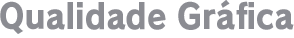
<style>
.page{position:relative;width:294px;height:38px;background:#ffffff}
.page>*{position:absolute;margin:0}
.t1{font:34.3px "RodinPro-EB";letter-spacing:0.001em;color:#8b8c92;scale:0.92 1}
</style>
<div class="page">
<p class="t1" style="left:0px;top:0px;width:294px;height:34px">Qualidade Gráfica</p>
</div>
